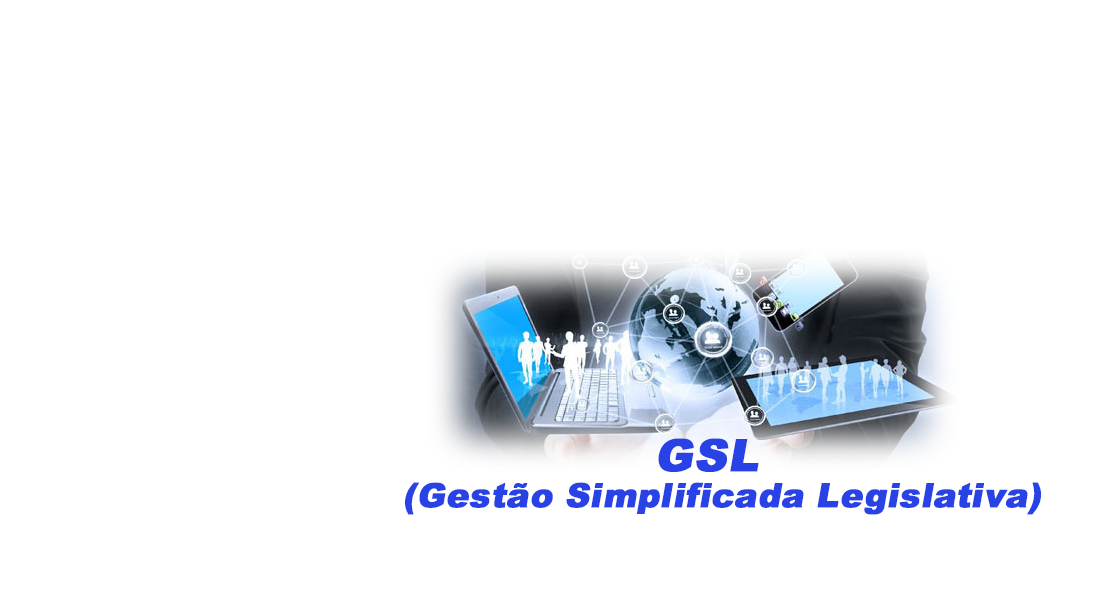
<style>
.page{position:relative;width:1100px;height:600px;background:#ffffff}
.page>*{position:absolute;margin:0}
.t1{font:76.7px "Arial-Black";color:#2842e5;font-weight:bold;font-style:italic}
.t2{font:57.5px "Arial-Black";color:#2842e5;font-weight:bold;font-style:italic}
</style>
<div class="page">
<p class="t1" style="left:658px;top:438px;width:101px;height:34px">GSL</p>
<p class="t2" style="left:405px;top:482px;width:636px;height:33px">(Gestão Simplificada Legislativa)</p>
</div>
